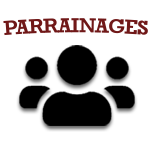
<style>
.page{position:relative;width:150px;height:150px;background:#ffffff}
.page>*{position:absolute;margin:0}
.t1{font:20.8px "Rockwell-Bold";letter-spacing:-0.05em;color:#701818}
</style>
<div class="page">
<p class="t1" style="left:3px;top:18px;width:145px;height:18px">PARRAINAGES</p>
</div>
